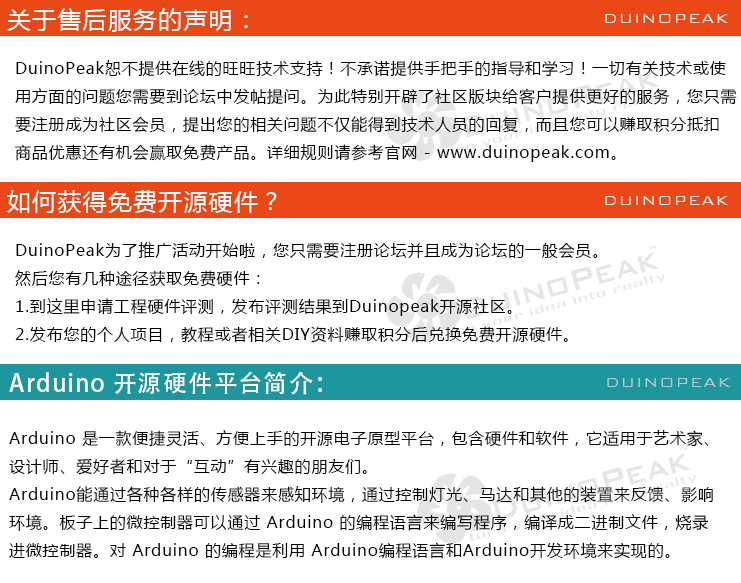
<style>
.page{position:relative;width:741px;height:583px;background:#ffffff}
.page>*{position:absolute;margin:0}
.t1{font:24px "MicrosoftYaHei";letter-spacing:0.05em;color:#ffffff}
.t2{font:18px "BankGothicBT-Light";letter-spacing:0.05em;color:#ffffff}
.t3{font:16px "MicrosoftYaHei";letter-spacing:0.05em;color:#000000}
.t4{font:24px "AdobeHeitiStd-Regular";letter-spacing:0.05em;color:#ffffff}
.t5{font:18px "BankGothicBT-Light";letter-spacing:0.05em;color:#a8cfd2}
</style>
<div class="page">
<p class="t1" style="left:7px;top:8px;width:241px;height:24px">关于售后服务的声明：</p>
<p class="t2" style="left:605px;top:14px;width:124px;height:9px;opacity:0.85">DUINOPEAK</p>
<p class="t3" style="left:15px;top:60px;width:722px;height:102px">DuinoPeak恕不提供在线的旺旺技术支持！不承诺提供手把手的指导和学习！一切有关技术或使<br>用方面的问题您需要到论坛中发帖提问。为此特别开辟了社区版块给客户提供更好的服务，您只需<br>要注册成为社区会员，提出您的相关问题不仅能得到技术人员的回复，而且您可以赚取积分抵扣<br>商品优惠还有机会赢取免费产品。详细规则请参考官网 - www.duinopeak.com。</p>
<p class="t1" style="left:7px;top:190px;width:270px;height:23px">如何获得免费开源硬件？</p>
<p class="t2" style="left:605px;top:196px;width:124px;height:9px;opacity:0.85">DUINOPEAK</p>
<p class="t3" style="left:15px;top:242px;width:583px;height:101px">DuinoPeak为了推广活动开始啦，您只需要注册论坛并且成为论坛的一般会员。<br>然后您有几种途径获取免费硬件：<br>1.到这里申请工程硬件评测，发布评测结果到Duinopeak开源社区。<br>2.发布您的个人项目，教程或者相关DIY资料赚取积分后兑换免费开源硬件。</p>
<p class="t4" style="left:9px;top:371px;width:313px;height:24px">Arduino 开源硬件平台简介：</p>
<p class="t5" style="left:607px;top:378px;width:124px;height:9px">DUINOPEAK</p>
<p class="t3" style="left:9px;top:430px;width:704px;height:129px">Arduino 是一款便捷灵活、方便上手的开源电子原型平台，包含硬件和软件，它适用于艺术家、<br>设计师、爱好者和对于“互动”有兴趣的朋友们。 <br>Arduino能通过各种各样的传感器来感知环境，通过控制灯光、马达和其他的装置来反馈、影响<br>环境。板子上的微控制器可以通过 Arduino 的编程语言来编写程序，编译成二进制文件，烧录<br>进微控制器。对 Arduino 的编程是利用 Arduino编程语言和Arduino开发环境来实现的。</p>
</div>
